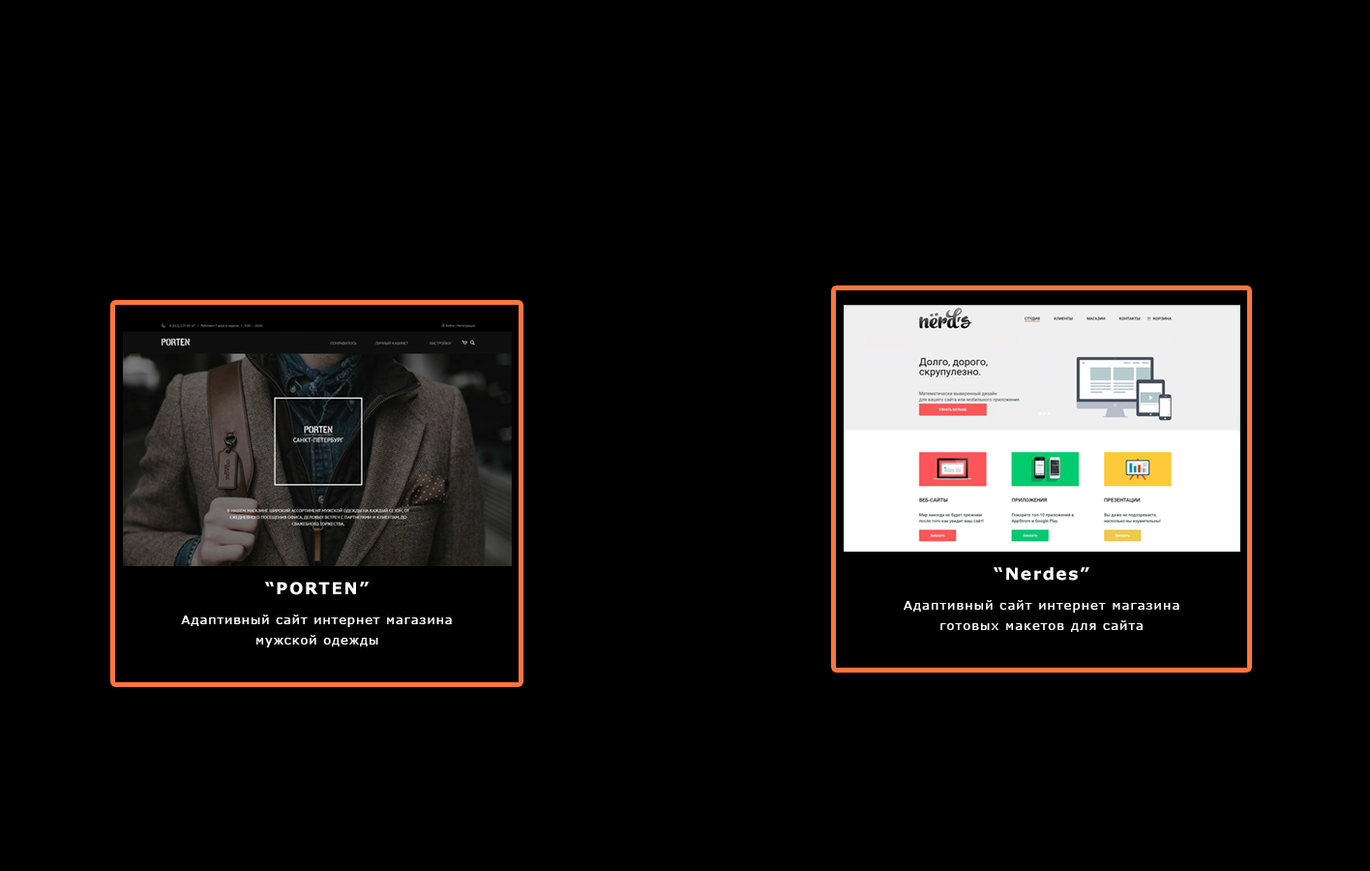
<style>
.page{position:relative;width:1370px;height:871px;background:#000000}
.page>*{position:absolute;margin:0}
.t1{font:16.1px "Verdana-Bold";letter-spacing:0.1em;color:#ffffff}
.t2{font:16.2px "Verdana-Bold";letter-spacing:0.1em;color:#000000}
.t3{font:12.1px/20.2px "Verdana";letter-spacing:0.1em;color:#ffffff}
</style>
<div class="page">
<p class="t1" style="left:993px;top:567px;width:96px;height:13px"><span class="t2"><br></span>“Nerdes”</p>
<p class="t1" style="left:265px;top:581px;width:104px;height:14px"><span class="t2"><br></span>“PORTEN”</p>
<p class="t3" style="left:903px;top:600px;width:276px;height:32px;text-align:center">Адаптивный сайт интернет магазина<br>готовых макетов для сайта</p>
<p class="t3" style="left:181px;top:614px;width:271px;height:33px;text-align:center">Адаптивный сайт интернет магазина<br>мужской одежды</p>
</div>
